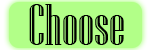
<style>
.page{position:relative;width:150px;height:50px;background:#b2ff88}
.page>*{position:absolute;margin:0}
.t1{font:58px "NiagaraEngraved-Reg";color:#000000}
</style>
<div class="page">
<p class="t1" style="left:29px;top:4px;width:95px;height:41px">Choose</p>
</div>
